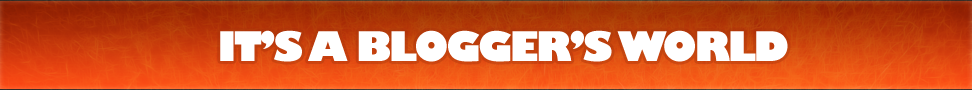
<style>
.page{position:relative;width:972px;height:90px}
.page>*{position:absolute;margin:0}
.t1{font:40px "GillSans-UltraBold";letter-spacing:-0.06em;color:#ffffff}
</style>
<div class="page">
<p class="t1" style="left:220px;top:30px;width:568px;height:32px">IT’S A BLOGGER’S WORLD</p>
</div>
